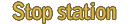
<style>
.page{position:relative;width:128px;height:24px;background:#ffffff}
.page>*{position:absolute;margin:0}
.t1{font:22px "BellGothicStd-Bold";letter-spacing:-0.025em;color:#e5b743}
</style>
<div class="page">
<p class="t1" style="left:13px;top:2px;width:103px;height:21px">Stop station</p>
</div>
